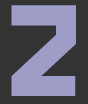
<style>
.page{position:relative;width:88px;height:104px;background:#333333}
.page>*{position:absolute;margin:0}
.t1{font:210px "CFSamuraiBob-Regular";color:#9d9dc7}
</style>
<div class="page">
<p class="t1" style="left:11px;top:5px;width:65px;height:91px">2</p>
</div>
